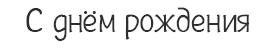
<style>
.page{position:relative;width:277px;height:50px;background:#ffffff}
.page>*{position:absolute;margin:0}
.t1{font:35px "Plainot";color:#2e2e2e}
</style>
<div class="page">
<p class="t1" style="left:26px;top:7px;width:223px;height:34px">С днём рождения</p>
</div>
